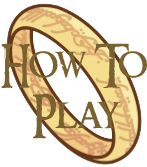
<style>
.page{position:relative;width:147px;height:167px;background:#ffffff}
.page>*{position:absolute;margin:0}
.t1{font:42px "RingbearerMedium";color:#796230}
</style>
<div class="page">
<p class="t1" style="left:1px;top:43px;width:146px;height:96px;text-align:center">How To<br>Play</p>
</div>
